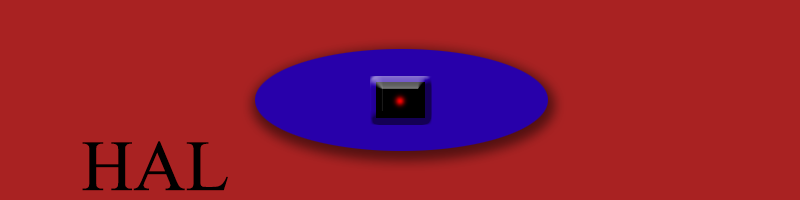
<style>
.page{position:relative;width:800px;height:200px;background:#a92222}
.page>*{position:absolute;margin:0}
.t1{font:72px "TimesNewRomanPSMT";color:#000000}
</style>
<div class="page">
<p class="t1" style="left:82px;top:141px;width:146px;height:50px">HAL</p>
</div>
